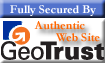
<style>
.page{position:relative;width:105px;height:63px;background:#ffffff}
.page>*{position:absolute;margin:0}
.t1{font:12px "Garamond-Bold";color:#ffffff}
.t2{font:12px/9px "Garamond-Bold";color:#ff6600}
</style>
<div class="page">
<p class="t1" style="left:10px;top:5px;width:86px;height:11px">Fully Secured By</p>
<p class="t2" style="left:34px;top:21px;width:66px;height:21px">Authentic <br>       Web Site</p>
</div>
